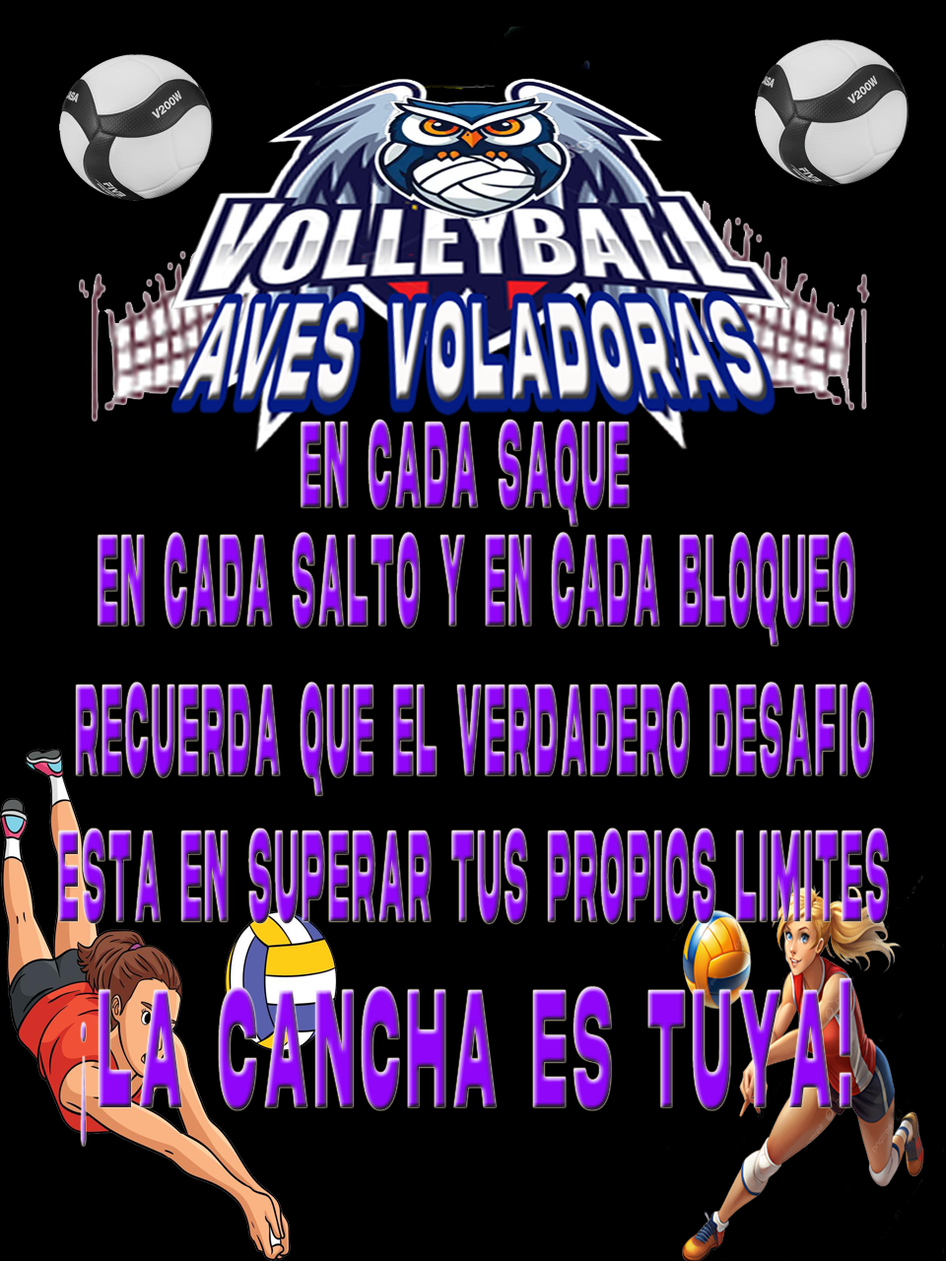
<style>
.page{position:relative;width:946px;height:1261px;background:#000000}
.page>*{position:absolute;margin:0}
.t1{font:129.6px "AkiraExpanded-SuperBold";letter-spacing:0.2em;scale:0.19 1}
.t2{font:137.9px "AkiraExpanded-SuperBold";letter-spacing:0.2em;scale:0.17 1}
.t3{font:178.9px "AkiraExpanded-SuperBold";letter-spacing:0.2em;scale:0.23 1}
.t4{font:178.9px "TimesNewRomanPSMT";letter-spacing:0.2em;scale:0.23 1}
</style>
<div class="page">
<p class="t1" style="left:300px;top:420px;width:328px;height:106px">En Cada Saque</p>
<p class="t2" style="left:98px;top:532px;width:757px;height:114px">En Cada Salto y en cada bloqueo</p>
<p class="t2" style="left:76px;top:682px;width:798px;height:114px">Recuerda que el verdadero desafio</p>
<p class="t2" style="left:58px;top:827px;width:831px;height:97px">esta en superar tus propios limites</p>
<p class="t3" style="left:81px;top:978px;width:770px;height:169px"><span class="t4">¡</span>la cancha es tuya!</p>
</div>
